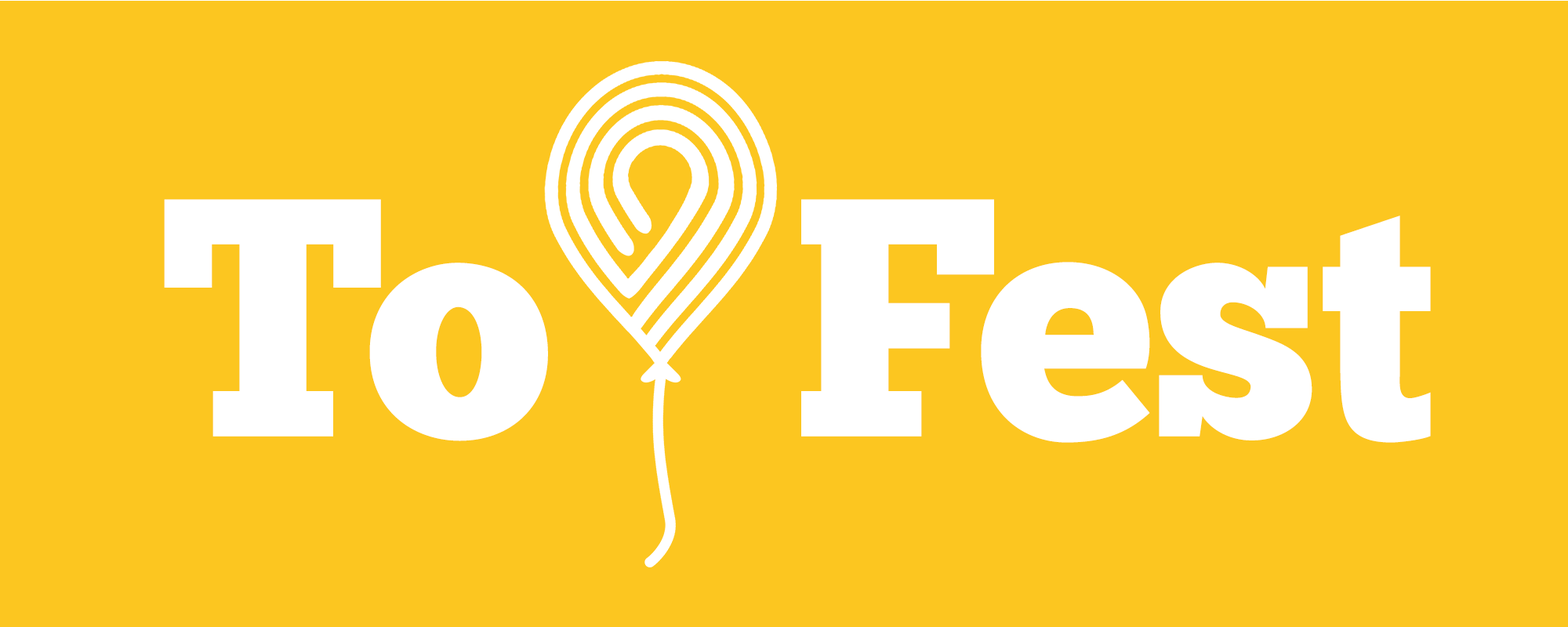
<style>
.page{position:relative;width:1568px;height:627px;background:#fcc620}
.page>*{position:absolute;margin:0}
.t1{font:338.7px "ChunkFive-Regular";color:#ffffff;scale:0.95 1}
</style>
<div class="page">
<p class="t1" style="left:164px;top:199px;width:1267px;height:244px">To   Fest</p>
</div>
